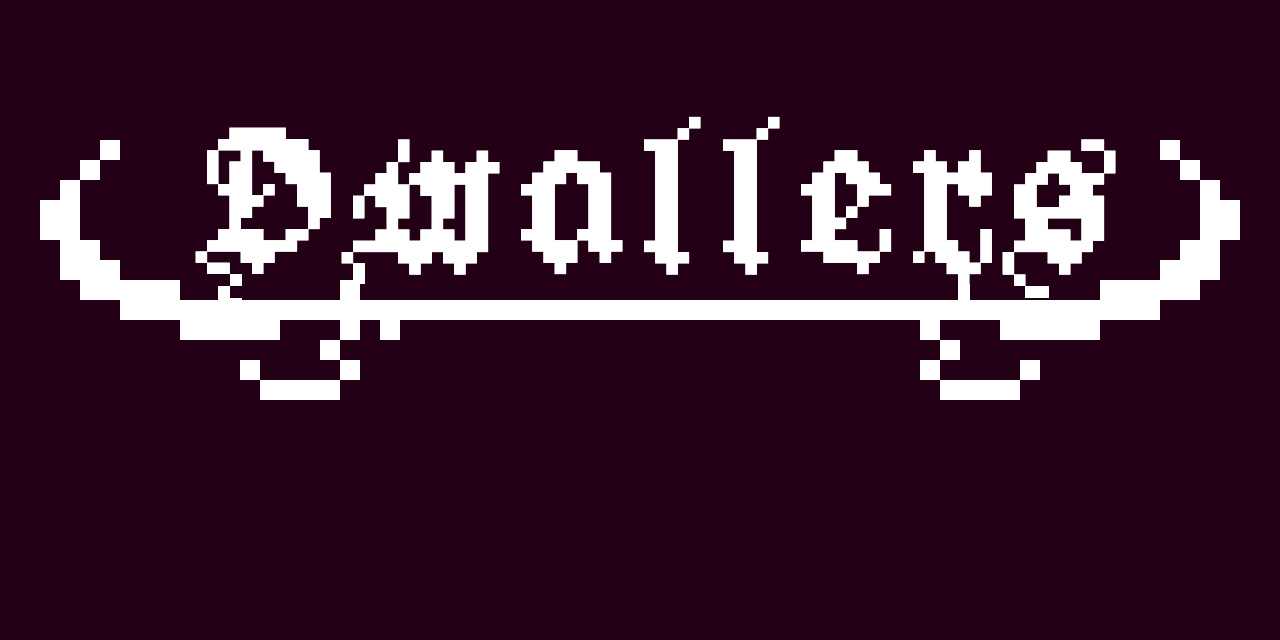
<style>
.page{position:relative;width:1280px;height:640px;background:#230015}
.page>*{position:absolute;margin:0}
.t1{font:180px "GothicPixels";letter-spacing:0.06em;color:#ffffff}
</style>
<div class="page">
<p class="t1" style="left:195px;top:116px;width:921px;height:170px">Dwallers</p>
</div>
